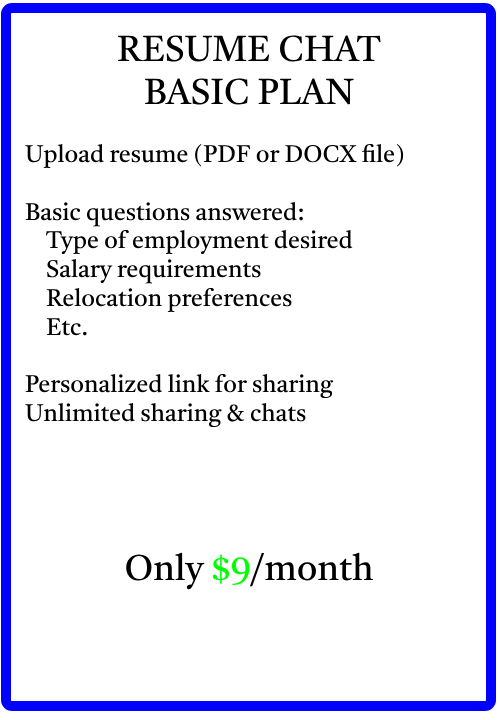
<style>
.page{position:relative;width:500px;height:720px;background:#ffffff}
.page>*{position:absolute;margin:0}
.t1{font:24px "Castoro-Regular";color:#000000}
.t2{font:36px "Castoro-Regular";color:#000000}
.t3{font:36px "Castoro-Regular";color:#00ff00}
</style>
<div class="page">
<p class="t1" style="left:25px;top:35px;width:379px;height:555px;text-align:center"><span class="t2">RESUME CHAT<br>BASIC PLAN<br><br></span>Upload resume (PDF or DOCX file)<br><br>Basic questions answered:<br>    Type of employment desired<br>    Salary requirements<br>    Relocation preferences<br>    Etc.<br><br>Personalized link for sharing<br>Unlimited sharing &amp; chats<br><br><br><br><br><span class="t2">Only </span><span class="t3">$9</span><span class="t2">/month</span></p>
</div>
